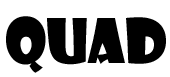
<style>
.page{position:relative;width:170px;height:77px;background:#ffffff}
.page>*{position:absolute;margin:0}
.t1{font:60px "ShowcardGothic-Reg";color:#000000}
</style>
<div class="page">
<p class="t1" style="left:6px;top:16px;width:160px;height:57px">QUAD</p>
</div>
